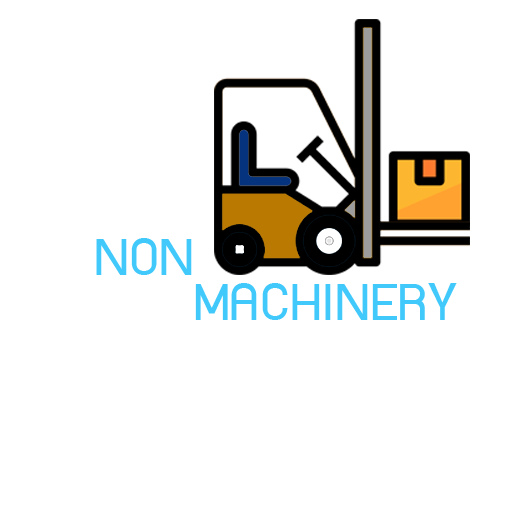
<style>
.page{position:relative;width:512px;height:512px;background:#ffffff}
.page>*{position:absolute;margin:0}
.t1{font:60px "supermarket";color:#42c9fb}
</style>
<div class="page">
<p class="t1" style="left:96px;top:238px;width:96px;height:37px">NON</p>
<p class="t1" style="left:195px;top:283px;width:262px;height:37px">MACHINERY</p>
</div>
